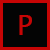
<style>
.page{position:relative;width:50px;height:50px;background:#040404}
.page>*{position:absolute;margin:0}
.t1{font:27.6px "LucidaGrande";color:#c70505}
</style>
<div class="page">
<p class="t1" style="left:19px;top:15px;width:13px;height:20px">P</p>
</div>
